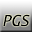
<style>
.page{position:relative;width:32px;height:32px}
.page>*{position:absolute;margin:0}
.t1{font:15px "LucidaSans-TypewriterOblique";color:#000000}
</style>
<div class="page">
<p class="t1" style="left:3px;top:14px;width:27px;height:13px">PGS</p>
</div>
